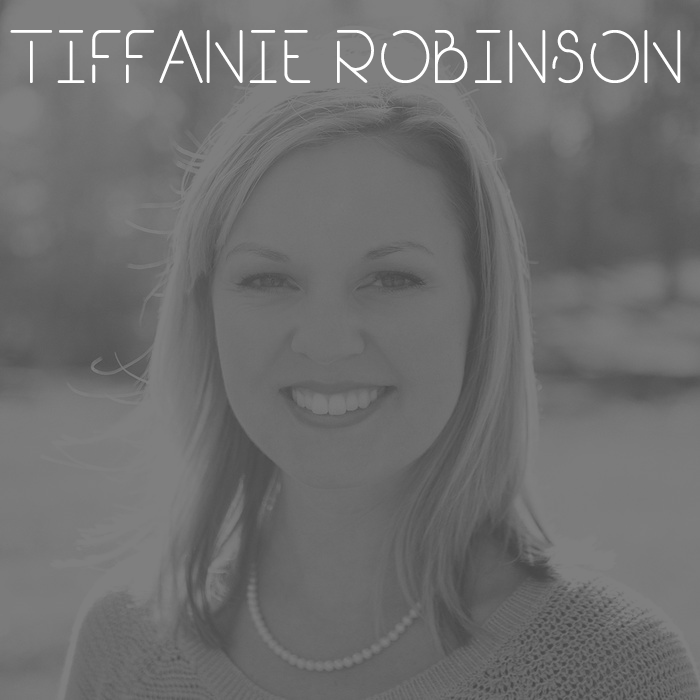
<style>
.page{position:relative;width:700px;height:700px}
.page>*{position:absolute;margin:0}
.t1{font:75px "Break-ExtraLight";color:#ffffff;font-weight:bold;scale:0.9 1}
</style>
<div class="page">
<p class="t1" style="left:10px;top:30px;width:671px;height:53px">TIFFANIE ROBINSON</p>
</div>
